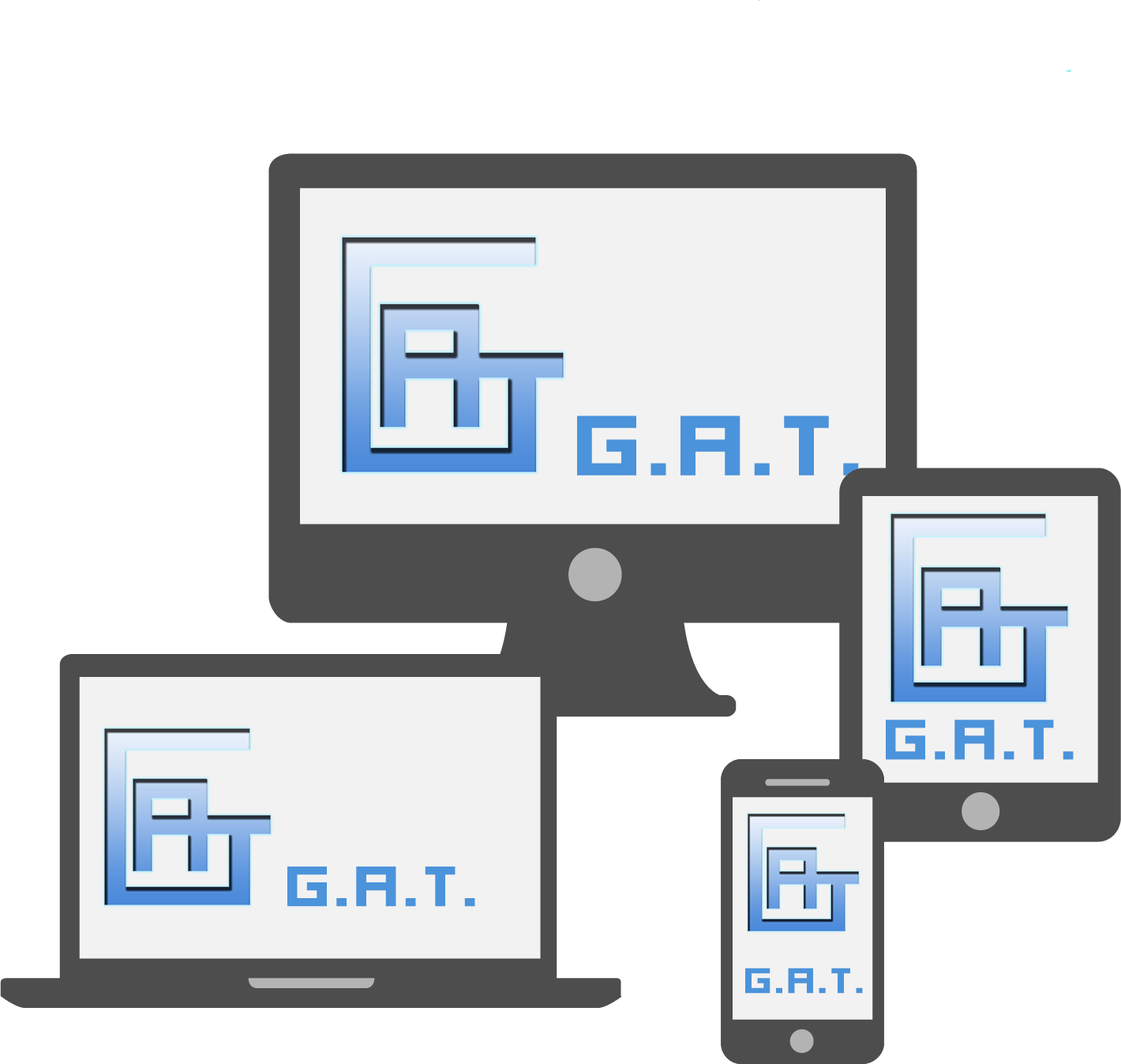
<style>
.page{position:relative;width:1121px;height:1064px;background:#ffffff}
.page>*{position:absolute;margin:0}
.t1{font:63.2px "04b03b";color:#4b93da;scale:1.25 1}
.t2{font:39.5px "04b03b";color:#4b93da;scale:1.25 1}
</style>
<div class="page">
<p class="t1" style="left:886px;top:719px;width:188px;height:41px">G.A.T.</p>
<p class="t1" style="left:287px;top:866px;width:188px;height:40px">G.A.T.</p>
<p class="t2" style="left:745px;top:967px;width:118px;height:26px">G.A.T.</p>
</div>
